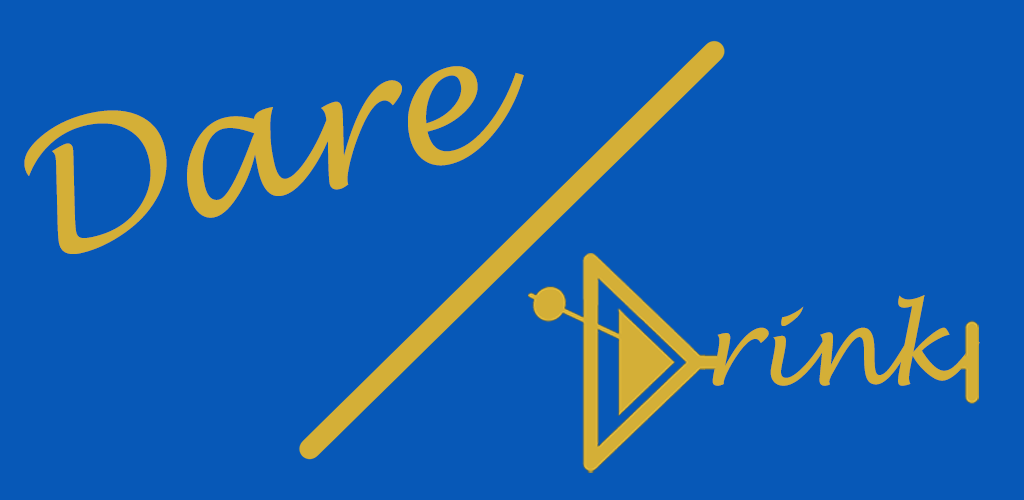
<style>
.page{position:relative;width:1024px;height:500px;background:#0758b7}
.page>*{position:absolute;margin:0}
.t1{font:170.8px "LucidaHandwriting-Italic";color:#d4af37}
.t2{font:104.2px "LucidaHandwriting-Italic";color:#d4af37}
</style>
<div class="page">
<p class="t1" style="left:24px;top:66px;width:500px;height:188px;rotate:-13deg">Dare</p>
<p class="t2" style="left:712px;top:295px;width:268px;height:91px">rink</p>
</div>
